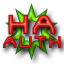
<style>
.page{position:relative;width:64px;height:64px;background:#ffffff}
.page>*{position:absolute;margin:0}
.t1{font:30px "TerminatorTwo";letter-spacing:0.1em;text-transform:uppercase}
.t2{font:18px "TerminatorTwo";letter-spacing:0.1em;text-transform:uppercase}
</style>
<div class="page">
<p class="t1" style="left:8px;top:14px;width:47px;height:21px">HA</p>
<p class="t2" style="left:3px;top:36px;width:58px;height:12px">Auth</p>
</div>
